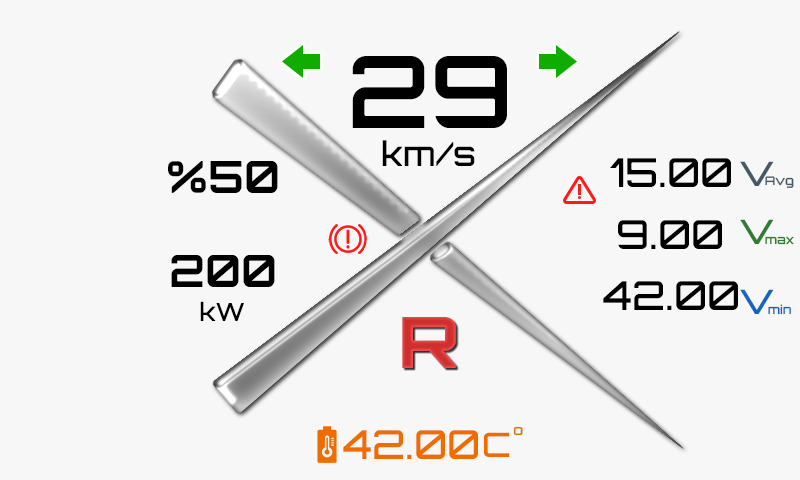
<style>
.page{position:relative;width:800px;height:480px;background:#f7f7f7}
.page>*{position:absolute;margin:0}
.t1{font:100px "Orbitron-SemiBold";color:#000000}
.t2{font:33.3px "Orbitron-Medium";color:#000000}
.t3{font:44.6px "Orbitron-Bold";color:#000000}
.t4{font:40px "Orbitron-Medium";color:#000000}
.t5{font:33.6px "Orbitron-Medium";color:#455a64;scale:1.05 1}
.t6{font:12px "Orbitron-Medium";color:#455a64;scale:1.05 1}
.t7{font:33.6px "Orbitron-Medium";color:#2e7d32;scale:1.05 1}
.t8{font:12px "Orbitron-Medium";color:#2e7d32;scale:1.05 1}
.t9{font:33.6px "Orbitron-Medium";color:#1565c0;scale:1.05 1}
.t10{font:25px "Orbitron-Medium";color:#000000}
.t11{font:12px "Orbitron-Medium";color:#1565c0;scale:1.05 1}
.t12{font:70.9px "Orbitron-ExtraBold";color:#d32f2f;scale:1.05 1}
.t13{font:40px "Orbitron-Medium";color:#ef6c00}
.t14{font:33.6px "Orbitron-Medium";color:#ef6c00;scale:1.05 1}
.t15{font:13.6px "Orbitron-Medium";color:#d87108;scale:1.05 1}
</style>
<div class="page">
<p class="t1" style="left:352px;top:56px;width:155px;height:72px">29</p>
<p class="t2" style="left:382px;top:140px;width:93px;height:26px">km/s</p>
<p class="t3" style="left:168px;top:161px;width:110px;height:32px">%50</p>
<p class="t4" style="left:610px;top:158px;width:121px;height:29px">15.00</p>
<p class="t5" style="left:740px;top:161px;width:34px;height:25px">V</p>
<p class="t6" style="left:765px;top:176px;width:29px;height:12px">Avg</p>
<p class="t4" style="left:618px;top:220px;width:104px;height:29px">9.00</p>
<p class="t7" style="left:740px;top:219px;width:34px;height:25px">V</p>
<p class="t8" style="left:765px;top:236px;width:29px;height:9px">max</p>
<p class="t3" style="left:171px;top:255px;width:104px;height:32px">200</p>
<p class="t4" style="left:603px;top:281px;width:135px;height:29px">42.00</p>
<p class="t9" style="left:740px;top:289px;width:34px;height:25px">V</p>
<p class="t10" style="left:200px;top:301px;width:44px;height:20px">kW</p>
<p class="t11" style="left:768px;top:304px;width:23px;height:11px">min</p>
<p class="t12" style="left:402px;top:317px;width:54px;height:51px">R</p>
<p class="t13" style="left:343px;top:430px;width:135px;height:29px">42.00</p>
<p class="t14" style="left:484px;top:432px;width:26px;height:25px">C</p>
<p class="t15" style="left:513px;top:426px;width:10px;height:10px">o</p>
</div>
